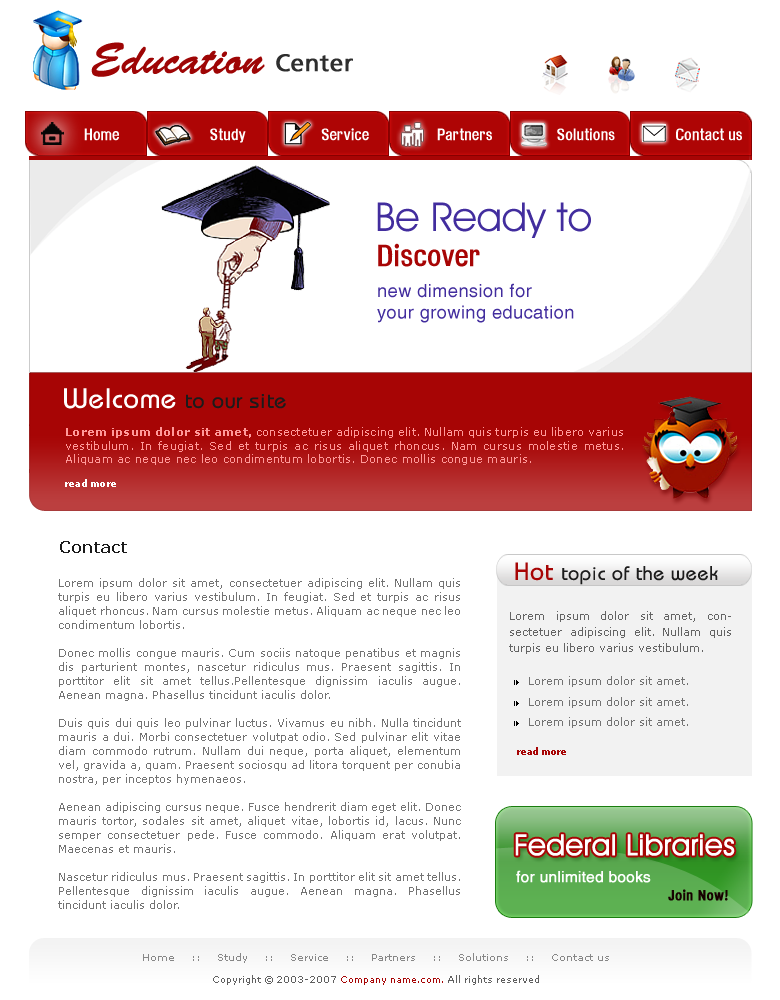
<style>
.page{position:relative;width:780px;height:1000px;background:#ffffff}
.page>*{position:absolute;margin:0}
.t1{font:44px "Banff-Normal";color:#9e0505}
.t2{font:24px "AGForeignerRomanMedium";color:#2e2e2e;font-weight:bold}
.t3{font:16px "HeadacheNormal";color:#ffffff}
.t4{font:40px "AvantGardeITCbyBT-Book";color:#422d9e}
.t5{font:30px "HeadacheNormal";color:#a70505}
.t6{font:18px "Helios";letter-spacing:0.025em;color:#422d9e}
.t7{font:22px "Bauhaus";letter-spacing:0.025em;color:#1b1b1b}
.t8{font:28px "Bauhaus";letter-spacing:0.025em;color:#ffffff}
.t9{font:11px "Verdana";letter-spacing:0.025em;color:#ff9999}
.t10{font:11px "Verdana-Bold";letter-spacing:0.025em;color:#ff9999}
.t11{font:9px "Verdana-Bold";letter-spacing:0.025em;color:#ffffff}
.t12{font:16px "Verdana-Bold";color:#1b1b1b}
.t13{font:20px "Bauhaus";letter-spacing:0.025em;color:#1b1b1b}
.t14{font:25px "Bauhaus";letter-spacing:0.025em;color:#a70505}
.t15{font:11px/14px "Verdana";color:#737373}
.t16{font:11px/16px "Verdana";color:#646464}
.t17{font:11px "Verdana";color:#737373}
.t18{font:9px "Verdana-Bold";color:#a70505}
.t19{font:29px "AvantGardeITCbyBT-Book";color:#ffffff;font-weight:bold}
.t20{font:15px "Helios";color:#ffffff;font-weight:bold}
.t21{font:14px "HeadacheNormal";letter-spacing:0.025em;color:#170000;font-weight:bold}
.t22{font:10px/22px "Verdana";color:#878787}
.t23{font:9px/22px "Verdana";color:#5f5f5f}
.t24{font:9px/22px "Verdana";color:#a70505}
</style>
<div class="page">
<p class="t1" style="left:91px;top:42px;width:174px;height:35px">Education</p>
<p class="t2" style="left:276px;top:54px;width:77px;height:18px">Center</p>
<p class="t3" style="left:84px;top:128px;width:658px;height:15px">Home                        Study                    Service                  Partners                 Solutions                Contact us</p>
<p class="t4" style="left:377px;top:202px;width:214px;height:36px">Be Ready to</p>
<p class="t5" style="left:378px;top:243px;width:102px;height:24px">Discover</p>
<p class="t6" style="left:377px;top:283px;width:197px;height:40px">new dimension for<br>your growing education</p>
<p class="t7" style="left:64px;top:388px;width:222px;height:21px"><span class="t8">Welcome </span>to our site</p>
<p class="t9" style="left:65px;top:427px;width:558px;height:60px;text-align:justify"><span class="t10">Lorem ipsum dolor sit amet,</span> consectetuer adipiscing elit. Nullam quis turpis eu libero varius vestibulum. In feugiat. Sed et turpis ac risus aliquet rhoncus. Nam cursus molestie metus. Aliquam ac neque nec leo condimentum lobortis. Donec mollis congue mauris. <br><br><span class="t11">read more</span></p>
<p class="t12" style="left:60px;top:541px;width:67px;height:12px">Contact</p>
<p class="t13" style="left:515px;top:562px;width:203px;height:23px"><span class="t14">Hot </span>topic of the week</p>
<p class="t15" style="left:58px;top:578px;width:403px;height:331px;text-align:justify">Lorem ipsum dolor sit amet, consectetuer adipiscing elit. Nullam quis turpis eu libero varius vestibulum. In feugiat. Sed et turpis ac risus aliquet rhoncus. Nam cursus molestie metus. Aliquam ac neque nec leo condimentum lobortis. <br><br>Donec mollis congue mauris. Cum sociis natoque penatibus et magnis dis parturient montes, nascetur ridiculus mus. Praesent sagittis. In porttitor elit sit amet tellus.Pellentesque dignissim iaculis augue. Aenean magna. Phasellus tincidunt iaculis dolor. <br><br>Duis quis dui quis leo pulvinar luctus. Vivamus eu nibh. Nulla tincidunt mauris a dui. Morbi consectetuer volutpat odio. Sed pulvinar elit vitae diam commodo rutrum. Nullam dui neque, porta aliquet, elementum vel, gravida a, quam. Praesent sociosqu ad litora torquent per conubia nostra, per inceptos hymenaeos.<br><br>Aenean adipiscing cursus neque. Fusce hendrerit diam eget elit. Donec mauris tortor, sodales sit amet, aliquet vitae, lobortis id, lacus. Nunc semper consectetuer pede. Fusce commodo. Aliquam erat volutpat. Maecenas et mauris. <br><br>Nascetur ridiculus mus. Praesent sagittis. In porttitor elit sit amet tellus.Pellentesque dignissim iaculis augue. Aenean magna. Phasellus tincidunt iaculis dolor.</p>
<p class="t16" style="left:509px;top:611px;width:222px;height:43px;text-align:justify">Lorem ipsum dolor sit amet, consectetuer adipiscing elit. Nullam quis turpis eu libero varius vestibulum.</p>
<p class="t17" style="left:529px;top:676px;width:159px;height:11px">Lorem ipsum dolor sit amet.</p>
<p class="t17" style="left:529px;top:697px;width:159px;height:11px">Lorem ipsum dolor sit amet.</p>
<p class="t17" style="left:529px;top:717px;width:159px;height:11px">Lorem ipsum dolor sit amet.</p>
<p class="t18" style="left:517px;top:747px;width:49px;height:8px"><span class="t17"><br></span>read more</p>
<p class="t19" style="left:515px;top:834px;width:220px;height:22px">Federal Libraries</p>
<p class="t20" style="left:516px;top:870px;width:135px;height:13px">for unlimited books</p>
<p class="t21" style="left:668px;top:889px;width:60px;height:12px">Join Now!</p>
<p class="t22" style="left:143px;top:953px;width:466px;height:32px;text-align:center">Home    ::    Study    ::    Service    ::    Partners    ::    Solutions    ::    Contact us<br><span class="t23">Copyright © 2003-2007</span><span class="t24"> Company name.com. </span><span class="t23">All rights reserved</span></p>
</div>
